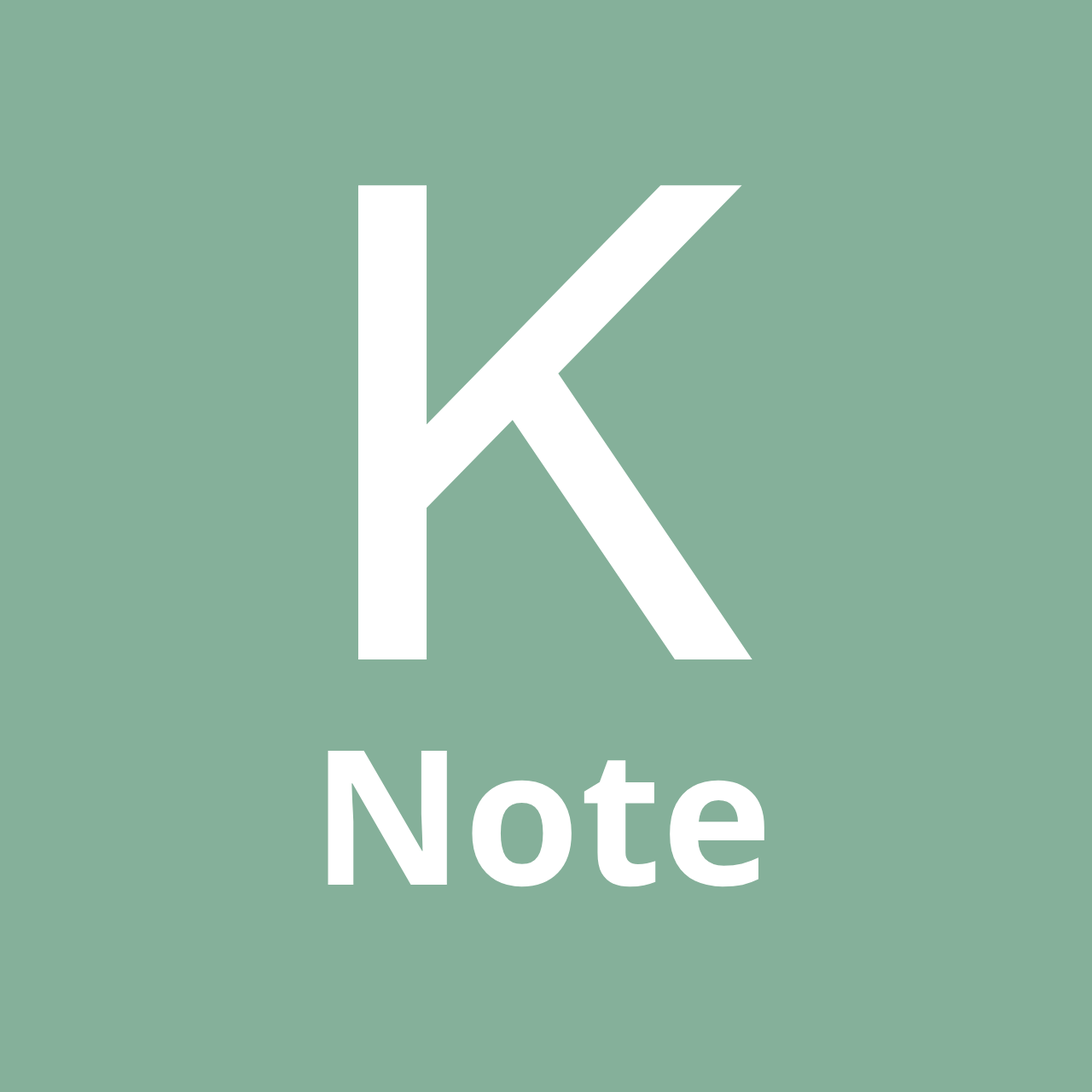
<style>
.page{position:relative;width:1092px;height:1092px;background:#85b09a}
.page>*{position:absolute;margin:0}
.t1{font:187.7px "NotoSans-Bold";color:#ffffff}
.t2{font:682.5px "CMUBright-SemiBold";color:#ffffff}
</style>
<div class="page">
<p class="t1" style="left:328px;top:185px;width:436px;height:702px;text-align:center"><span class="t2">K<br></span>Note</p>
</div>
